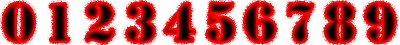
<style>
.page{position:relative;width:400px;height:45px;background:#ffffff}
.page>*{position:absolute;margin:0}
.t1{font:50px "StencilStd";letter-spacing:0.125em}
</style>
<div class="page">
<p class="t1" style="left:3px;top:3px;width:31px;height:39px">0</p>
<p class="t1" style="left:51px;top:4px;width:18px;height:37px">1</p>
<p class="t1" style="left:86px;top:3px;width:28px;height:39px">2</p>
<p class="t1" style="left:127px;top:3px;width:27px;height:39px">3</p>
<p class="t1" style="left:165px;top:4px;width:30px;height:37px">4</p>
<p class="t1" style="left:207px;top:3px;width:27px;height:39px">5</p>
<p class="t1" style="left:245px;top:3px;width:30px;height:39px">6</p>
<p class="t1" style="left:288px;top:3px;width:25px;height:39px">7</p>
<p class="t1" style="left:325px;top:3px;width:29px;height:39px">8</p>
<p class="t1" style="left:365px;top:3px;width:30px;height:39px">9</p>
</div>
